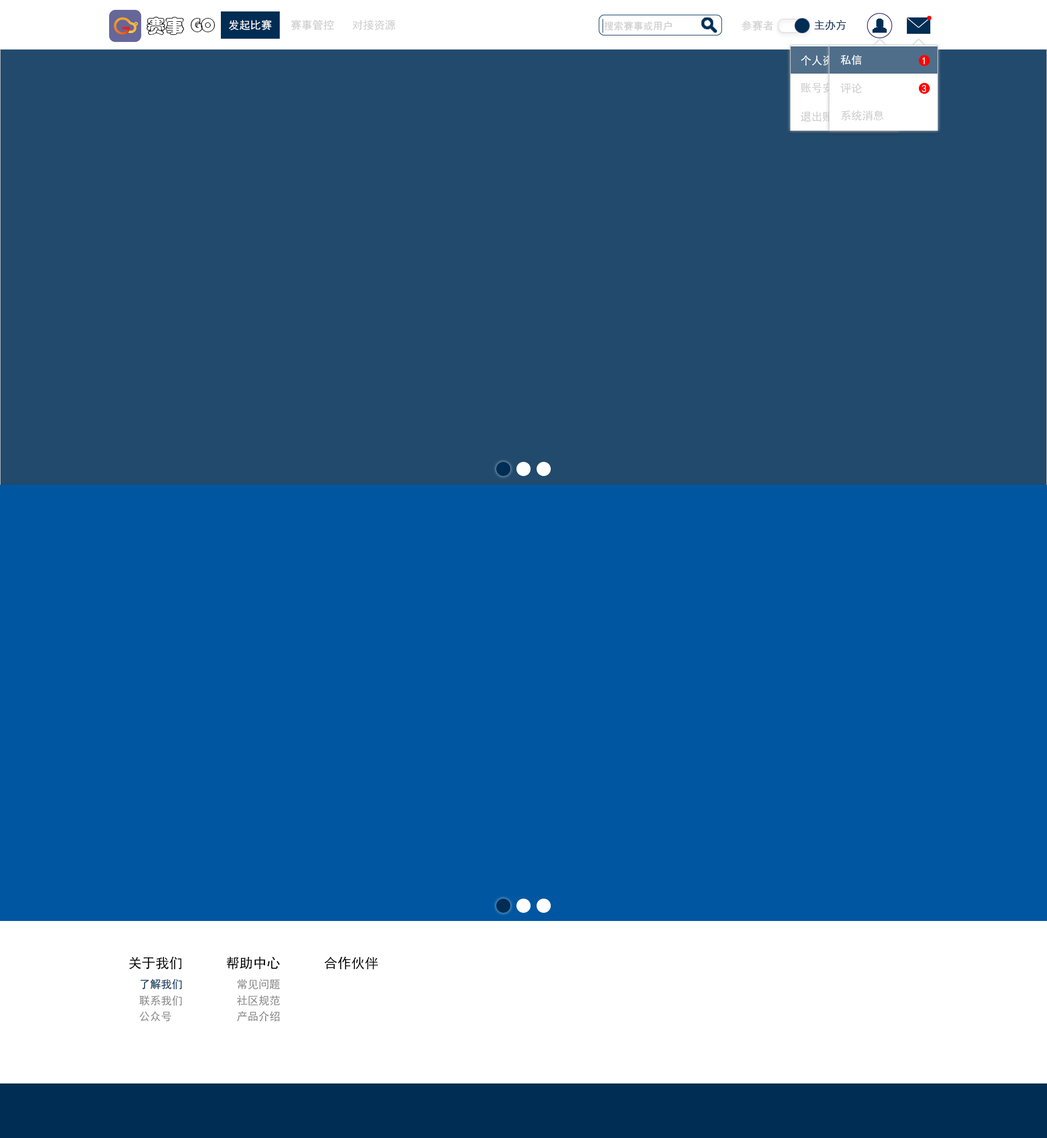
<style>
.page{position:relative;width:1047px;height:1138px;background:#0056a0}
.page>*{position:absolute;margin:0}
.t1{font:19.1px "STCaiyun";color:#000000}
.t2{font:10.9px "SimHei";color:#ffffff}
.t3{font:10.9px "SimHei";color:#cccccc}
.t4{font:9.8px "SimHei";color:#cccccc}
.t5{font:10.9px "SimHei";color:#002d54}
.t6{font:10.9px "SimHei"}
.t7{font:10.2px "SimHei";color:#ffffff}
.t8{font:13.6px "SimHei";color:#000000}
.t9{font:10.9px "SimHei";color:#214a6d}
.t10{font:10.9px "SimHei";color:#898888}
</style>
<div class="page">
<p class="t1" style="left:146px;top:16px;width:69px;height:19px">赛事GO</p>
<p class="t2" style="left:229px;top:20px;width:43px;height:11px">发起比赛</p>
<p class="t2" style="left:229px;top:20px;width:43px;height:11px">发起比赛</p>
<p class="t3" style="left:291px;top:20px;width:43px;height:11px">赛事管控</p>
<p class="t3" style="left:352px;top:20px;width:43px;height:11px">对接资源</p>
<p class="t4" style="left:604px;top:21px;width:68px;height:10px">搜索赛事或用户</p>
<p class="t3" style="left:742px;top:20px;width:32px;height:11px">参赛者</p>
<p class="t5" style="left:814px;top:20px;width:33px;height:11px">主办方</p>
<p class="t6" style="left:801px;top:55px;width:43px;height:11px">个人资料</p>
<p class="t6" style="left:801px;top:55px;width:43px;height:11px">个人资料</p>
<p class="t2" style="left:841px;top:55px;width:21px;height:10px">私信</p>
<p class="t7" style="left:922px;top:57px;width:3px;height:7px">1</p>
<p class="t3" style="left:801px;top:82px;width:43px;height:11px">账号安全</p>
<p class="t3" style="left:841px;top:83px;width:21px;height:11px">评论</p>
<p class="t7" style="left:922px;top:85px;width:5px;height:7px">3</p>
<p class="t3" style="left:801px;top:111px;width:43px;height:11px">退出账号</p>
<p class="t3" style="left:841px;top:110px;width:43px;height:11px">系统消息</p>
<p class="t8" style="left:129px;top:957px;width:53px;height:13px">关于我们</p>
<p class="t8" style="left:226px;top:957px;width:54px;height:13px">帮助中心</p>
<p class="t8" style="left:325px;top:957px;width:53px;height:13px">合作伙伴</p>
<p class="t9" style="left:140px;top:979px;width:42px;height:11px">了解我们</p>
<p class="t9" style="left:140px;top:979px;width:42px;height:11px">了解我们</p>
<p class="t10" style="left:237px;top:979px;width:43px;height:11px">常见问题</p>
<p class="t10" style="left:139px;top:996px;width:43px;height:10px">联系我们</p>
<p class="t10" style="left:237px;top:996px;width:43px;height:10px">社区规范</p>
<p class="t10" style="left:140px;top:1011px;width:31px;height:11px">公众号</p>
<p class="t10" style="left:237px;top:1011px;width:43px;height:11px">产品介绍</p>
</div>
